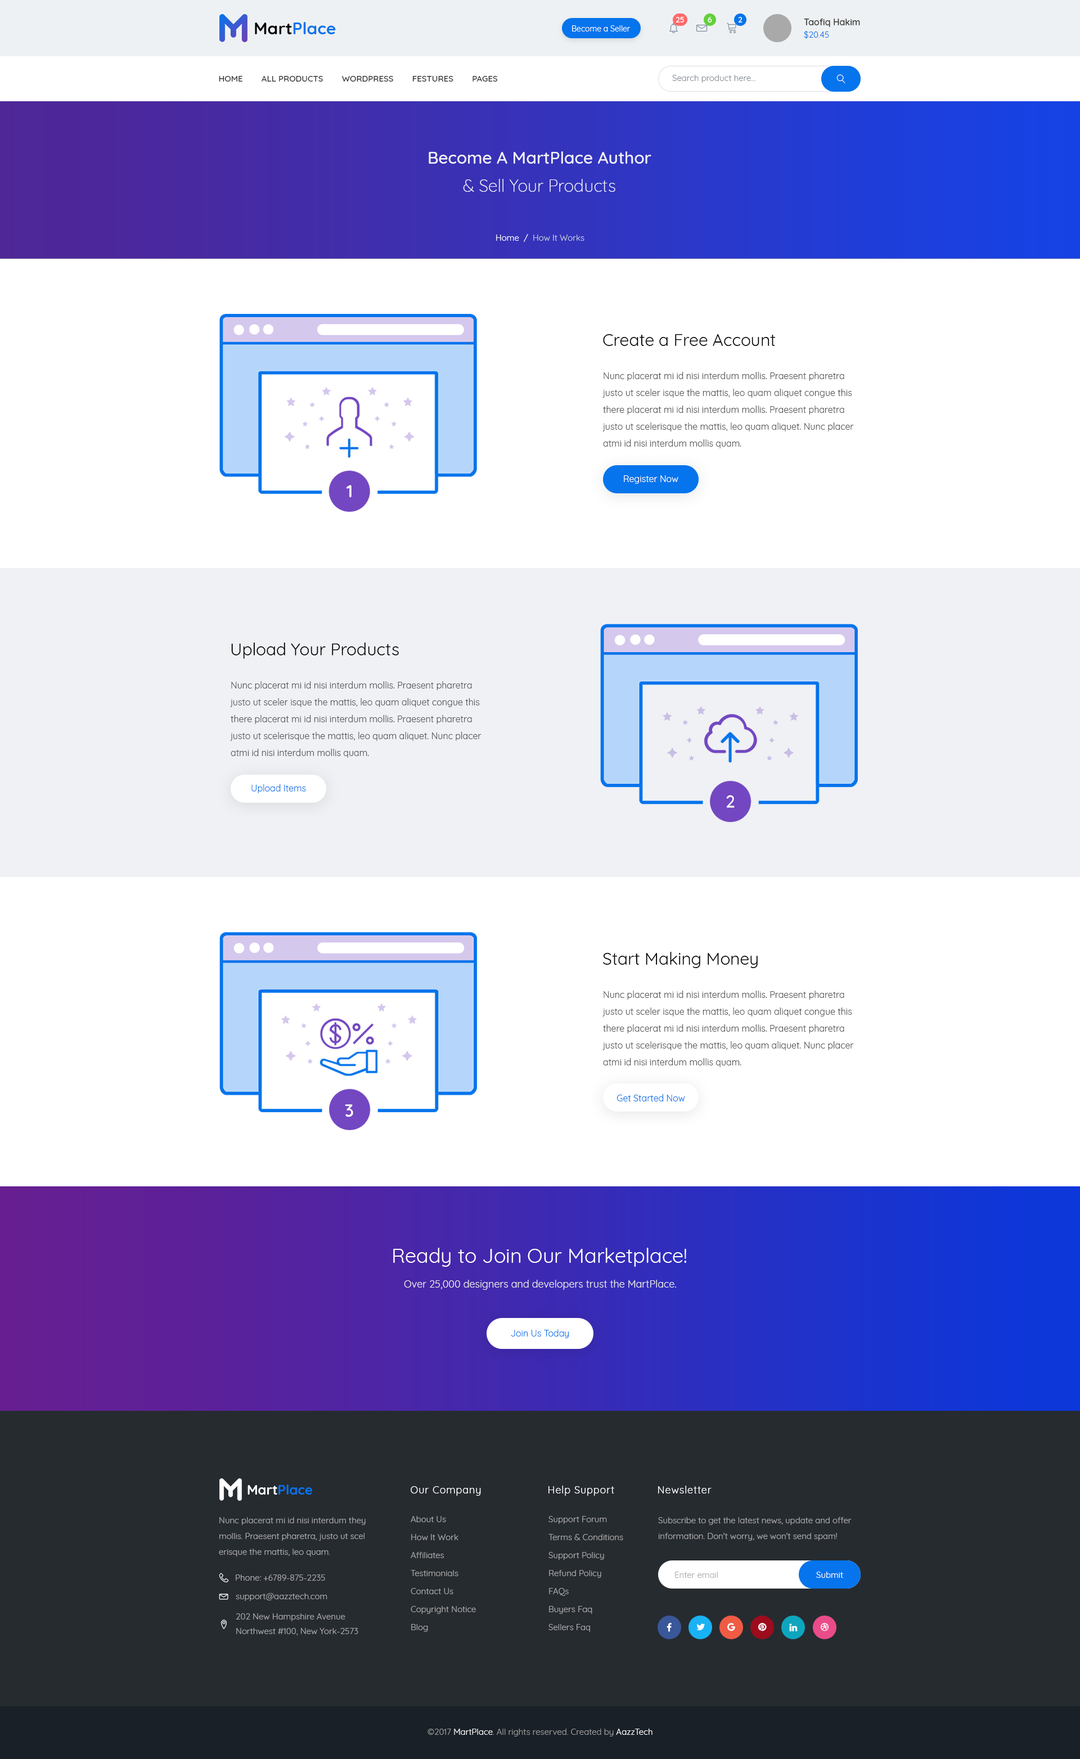
<style>
.page{position:relative;width:1080px;height:1759px;background:#ffffff}
.page>*{position:absolute;margin:0}
.t1{font:7.9px "Quicksand-Medium";color:#ffffff;text-transform:uppercase}
.t2{font:16.9px "Quicksand-Bold";color:#0674ec}
.t3{font:16.9px "Quicksand-Bold";color:#000000}
.t4{font:7.9px "Quicksand-Regular";color:#ffffff}
.t5{font:9px/12.4px "Quicksand-Medium";color:#333333}
.t6{font:8.4px/12.4px "Quicksand-Regular";color:#0674ec}
.t7{font:8.4px "Quicksand-Medium";color:#333333;text-transform:uppercase}
.t8{font:8.4px "Quicksand-Regular";color:#898f96}
.t9{font:16.9px/28.1px "Quicksand-Medium";color:#f3f3f8}
.t10{font:16.9px/28.1px "Quicksand-Light";color:#f3f3f8}
.t11{font:8.4px "Quicksand-Regular";color:#bfcad7}
.t12{font:8.4px "Quicksand-Regular";color:#ffffff}
.t13{font:16.9px "Quicksand-Regular";color:#000000}
.t14{font:9px/16.9px "Quicksand-Regular";color:#555555}
.t15{font:9px "Quicksand-Regular";color:#ffffff}
.t16{font:9px "Quicksand-Regular";color:#0674ec}
.t17{font:20.2px "Quicksand-Regular";color:#ffffff}
.t18{font:10.1px "Quicksand-Regular";color:#e7e7e7}
.t19{font:13.5px "Quicksand-Bold";color:#0674ec}
.t20{font:13.5px "Quicksand-Bold";color:#ffffff}
.t21{font:10.1px "Quicksand-Regular";letter-spacing:0.05em;color:#ffffff}
.t22{font:8.4px/15.8px "Quicksand-Regular";color:#ababab}
.t23{font:8.4px/18px "Quicksand-Regular";color:#ababab}
.t24{font:8.4px "Quicksand-Regular";color:#ababab}
.t25{font:8.4px/14.6px "Quicksand-Regular";color:#ababab}
.t26{font:8.4px "Quicksand-Regular";color:#999999}
</style>
<div class="page">
<p class="t1" style="left:676px;top:17px;width:8px;height:5px">25</p>
<p class="t1" style="left:708px;top:17px;width:4px;height:5px">6</p>
<p class="t1" style="left:738px;top:17px;width:4px;height:5px">2</p>
<p class="t2" style="left:255px;top:22px;width:81px;height:12px"><span class="t3">Mart</span>Place</p>
<p class="t4" style="left:572px;top:25px;width:59px;height:7px">Become a Seller</p>
<p class="t5" style="left:804px;top:19px;width:56px;height:20px">Taofiq Hakim<br><span class="t6">$20.45</span></p>
<p class="t7" style="left:219px;top:76px;width:279px;height:6px">HOME        all products        wordpress        festures        Pages</p>
<p class="t8" style="left:672px;top:75px;width:83px;height:8px">Search product here...</p>
<p class="t9" style="left:429px;top:151px;width:222px;height:41px;text-align:center">Become A MartPlace Author<br><span class="t10">&amp; Sell Your Products</span></p>
<p class="t11" style="left:496px;top:234px;width:88px;height:8px"><span class="t12">Home  /  </span>How It Works</p>
<p class="t13" style="left:603px;top:334px;width:173px;height:12px">Create a Free Account</p>
<p class="t14" style="left:602px;top:372px;width:252px;height:76px">Nunc placerat mi id nisi interdum mollis. Praesent pharetra justo ut sceler isque the mattis, leo quam aliquet congue this there placerat mi id nisi interdum mollis. Praesent pharetra justo ut scelerisque the mattis, leo quam aliquet. Nunc placer atmi id nisi interdum mollis quam.</p>
<p class="t15" style="left:624px;top:475px;width:54px;height:9px">Register Now</p>
<p class="t13" style="left:231px;top:642px;width:168px;height:17px">Upload Your Products</p>
<p class="t14" style="left:230px;top:681px;width:252px;height:77px">Nunc placerat mi id nisi interdum mollis. Praesent pharetra justo ut sceler isque the mattis, leo quam aliquet congue this there placerat mi id nisi interdum mollis. Praesent pharetra justo ut scelerisque the mattis, leo quam aliquet. Nunc placer atmi id nisi interdum mollis quam.</p>
<p class="t16" style="left:251px;top:784px;width:55px;height:9px">Upload Items</p>
<p class="t13" style="left:603px;top:952px;width:155px;height:16px">Start Making Money</p>
<p class="t14" style="left:602px;top:991px;width:252px;height:76px">Nunc placerat mi id nisi interdum mollis. Praesent pharetra justo ut sceler isque the mattis, leo quam aliquet congue this there placerat mi id nisi interdum mollis. Praesent pharetra justo ut scelerisque the mattis, leo quam aliquet. Nunc placer atmi id nisi interdum mollis quam.</p>
<p class="t16" style="left:616px;top:1094px;width:69px;height:7px">Get Started Now</p>
<p class="t17" style="left:393px;top:1248px;width:293px;height:19px">Ready to Join Our Marketplace!</p>
<p class="t18" style="left:404px;top:1280px;width:272px;height:10px">Over 25,000 designers and developers trust the MartPlace.</p>
<p class="t16" style="left:511px;top:1329px;width:58px;height:9px">Join Us Today</p>
<p class="t19" style="left:248px;top:1484px;width:65px;height:11px"><span class="t20">Mart</span>Place</p>
<p class="t21" style="left:411px;top:1486px;width:70px;height:10px">Our Company</p>
<p class="t21" style="left:548px;top:1486px;width:66px;height:10px">Help Support</p>
<p class="t21" style="left:658px;top:1486px;width:54px;height:7px">Newsletter</p>
<p class="t22" style="left:219px;top:1517px;width:147px;height:39px">Nunc placerat mi id nisi interdum they mollis. Praesent pharetra, justo ut scel erisque the mattis, leo quam.</p>
<p class="t23" style="left:411px;top:1516px;width:65px;height:116px">About Us<br>How It Work<br>Affiliates<br>Testimonials<br>Contact Us<br>Copyright Notice<br>Blog</p>
<p class="t23" style="left:548px;top:1516px;width:75px;height:116px">Support Forum<br>Terms &amp; Conditions<br>Support Policy<br>Refund Policy<br>FAQs<br>Buyers Faq<br>Sellers Faq</p>
<p class="t22" style="left:658px;top:1517px;width:194px;height:24px">Subscribe to get the latest news, update and offer information. Don't worry, we won't send spam!</p>
<p class="t24" style="left:236px;top:1574px;width:89px;height:7px">Phone: +6789-875-2235</p>
<p class="t24" style="left:675px;top:1572px;width:43px;height:6px">Enter email</p>
<p class="t12" style="left:816px;top:1572px;width:27px;height:6px">Submit</p>
<p class="t24" style="left:236px;top:1593px;width:91px;height:8px">support@aazztech.com</p>
<p class="t25" style="left:236px;top:1613px;width:122px;height:22px">202 New Hampshire Avenue<br>Northwest #100, New York-2573</p>
<p class="t26" style="left:428px;top:1729px;width:224px;height:7px">©2017 <span class="t12">MartPlace</span>. All rights reserved. Created by <span class="t12">AazzTech</span></p>
</div>
